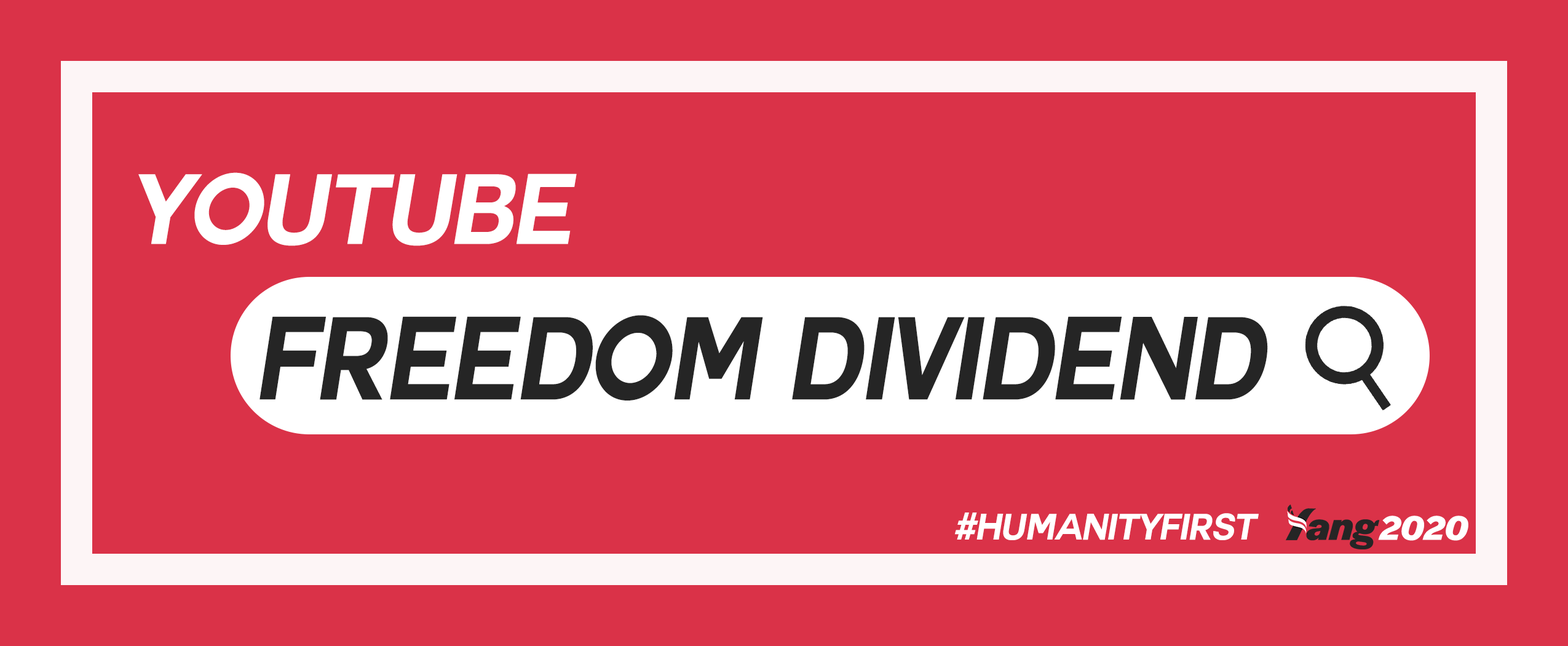
<style>
.page{position:relative;width:1568px;height:646px;background:#da3248}
.page>*{position:absolute;margin:0}
.t1{font:97.4px "Couture-Bold";letter-spacing:-0.02em;color:#ffffff;font-style:italic;scale:0.95 1}
.t2{font:115.1px "Couture-Bold";letter-spacing:-0.02em;color:#252525;font-style:italic;scale:0.89 1}
.t3{font:35.9px "Couture-Bold";letter-spacing:-0.02em;color:#ffffff;font-style:italic;scale:0.95 1}
.t4{font:35.9px "LemonMilk";letter-spacing:-0.02em;color:#ffffff;font-style:italic;scale:0.95 1}
</style>
<div class="page">
<p class="t1" style="left:138px;top:172px;width:439px;height:74px">Youtube</p>
<p class="t2" style="left:259px;top:315px;width:1009px;height:85px">Freedom Dividend</p>
<p class="t3" style="left:954px;top:512px;width:305px;height:28px"><span class="t4">#</span>HumanityFirst</p>
</div>
